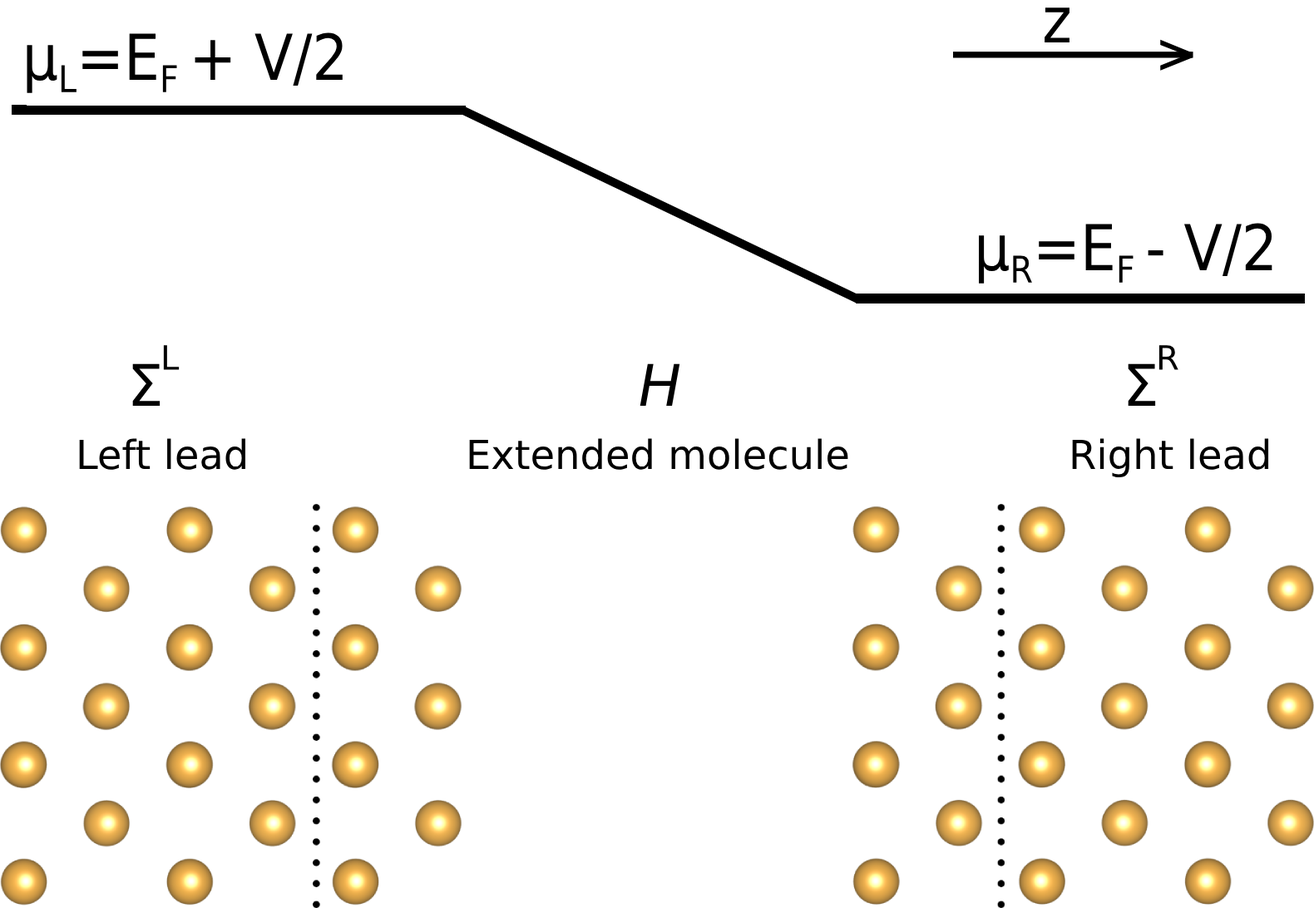
<style>
.page{position:relative;width:1314px;height:908px;background:#ffffff}
.page>*{position:absolute;margin:0}
.t1{font:63.4px "DejaVuSans";color:#000000;scale:0.89 1}
.t2{font:57.5px "DejaVuSans";color:#000000;scale:0.89 1}
.t3{font:57.4px "DejaVuSans";color:#000000}
.t4{font:57.4px "DejaVuSans";color:#000000;font-style:italic}
.t5{font:39.9px "DejaVuSans";color:#000000}
</style>
<div class="page">
<p class="t1" style="left:1044px;top:7px;width:25px;height:35px">z</p>
<p class="t1" style="left:27px;top:32px;width:316px;height:61px">μL=EF + V/2</p>
<p class="t2" style="left:1160px;top:39px;width:32px;height:32px">&gt;</p>
<p class="t1" style="left:978px;top:223px;width:294px;height:60px">μR=EF - V/2</p>
<p class="t3" style="left:163px;top:345px;width:17px;height:25px">L</p>
<p class="t3" style="left:1158px;top:345px;width:20px;height:25px">R</p>
<p class="t3" style="left:132px;top:363px;width:28px;height:43px">Σ</p>
<p class="t4" style="left:639px;top:363px;width:41px;height:43px"><span class="t3"> </span>H</p>
<p class="t3" style="left:1127px;top:363px;width:29px;height:43px">Σ</p>
<p class="t5" style="left:79px;top:438px;width:166px;height:32px">Left lead</p>
<p class="t5" style="left:469px;top:438px;width:379px;height:32px">Extended molecule</p>
<p class="t5" style="left:1072px;top:438px;width:197px;height:39px">Right lead</p>
</div>
